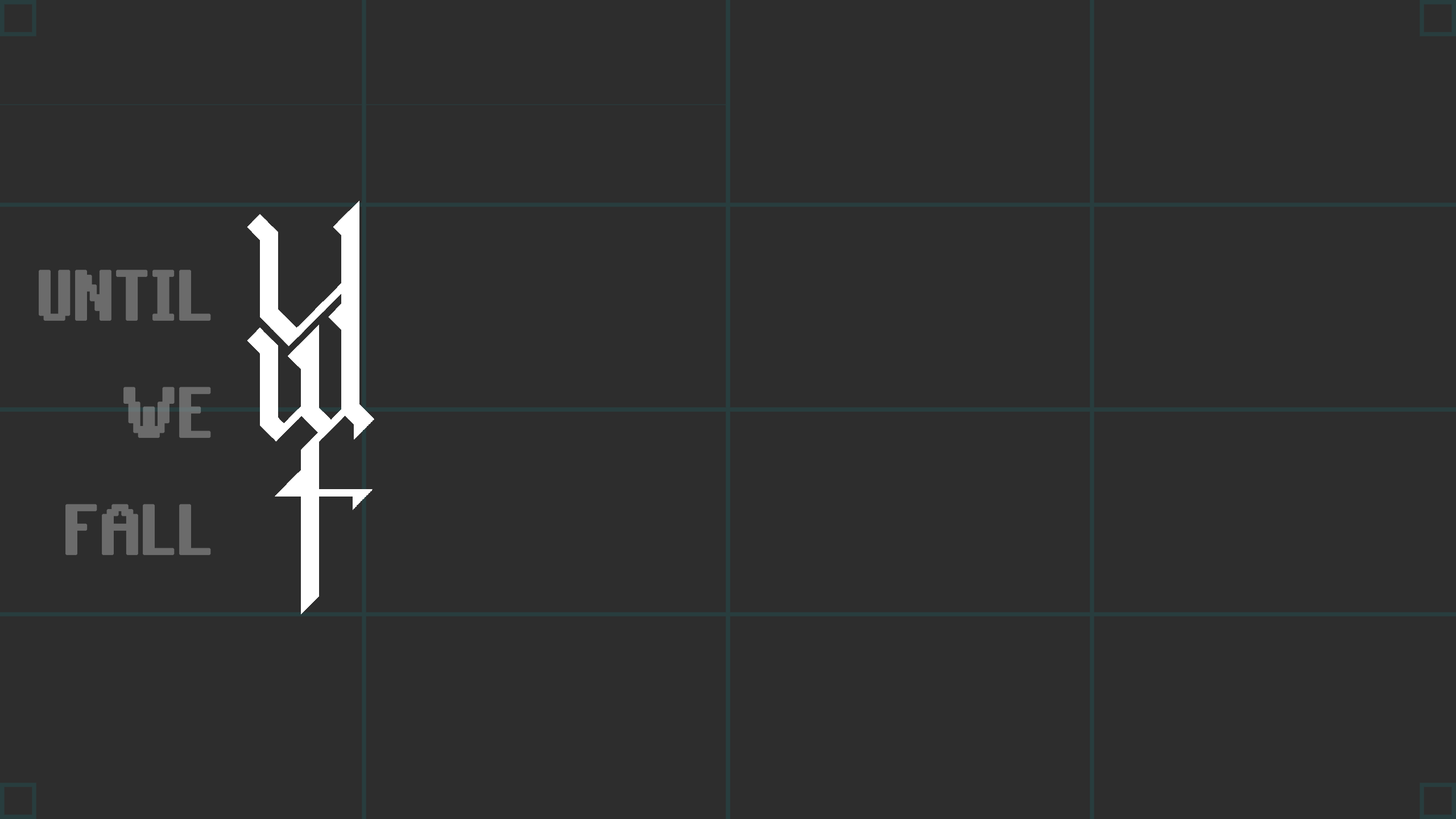
<style>
.page{position:relative;width:1456px;height:819px;background:#2d2d2d}
.page>*{position:absolute;margin:0}
.t1{font:77.9px/117.2px "RuneScape-UF";letter-spacing:0.001em;color:#6b6b6b;font-weight:bold}
.t2{font:61.4px/75.1px "RuneScape-UF";letter-spacing:0.28em;color:#6b6b6b;font-weight:bold}
</style>
<div class="page">
<p class="t1" style="left:39px;top:270px;width:172px;height:285px;text-align:right"><span class="t2"><br></span>UNTIL<br>WE<br>FALL</p>
</div>
